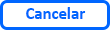
<style>
.page{position:relative;width:110px;height:30px;background:#ffffff}
.page>*{position:absolute;margin:0}
.t1{font:16.7px "Calibri-Bold";color:#0066ff}
</style>
<div class="page">
<p class="t1" style="left:26px;top:7px;width:60px;height:12px">Cancelar</p>
</div>
